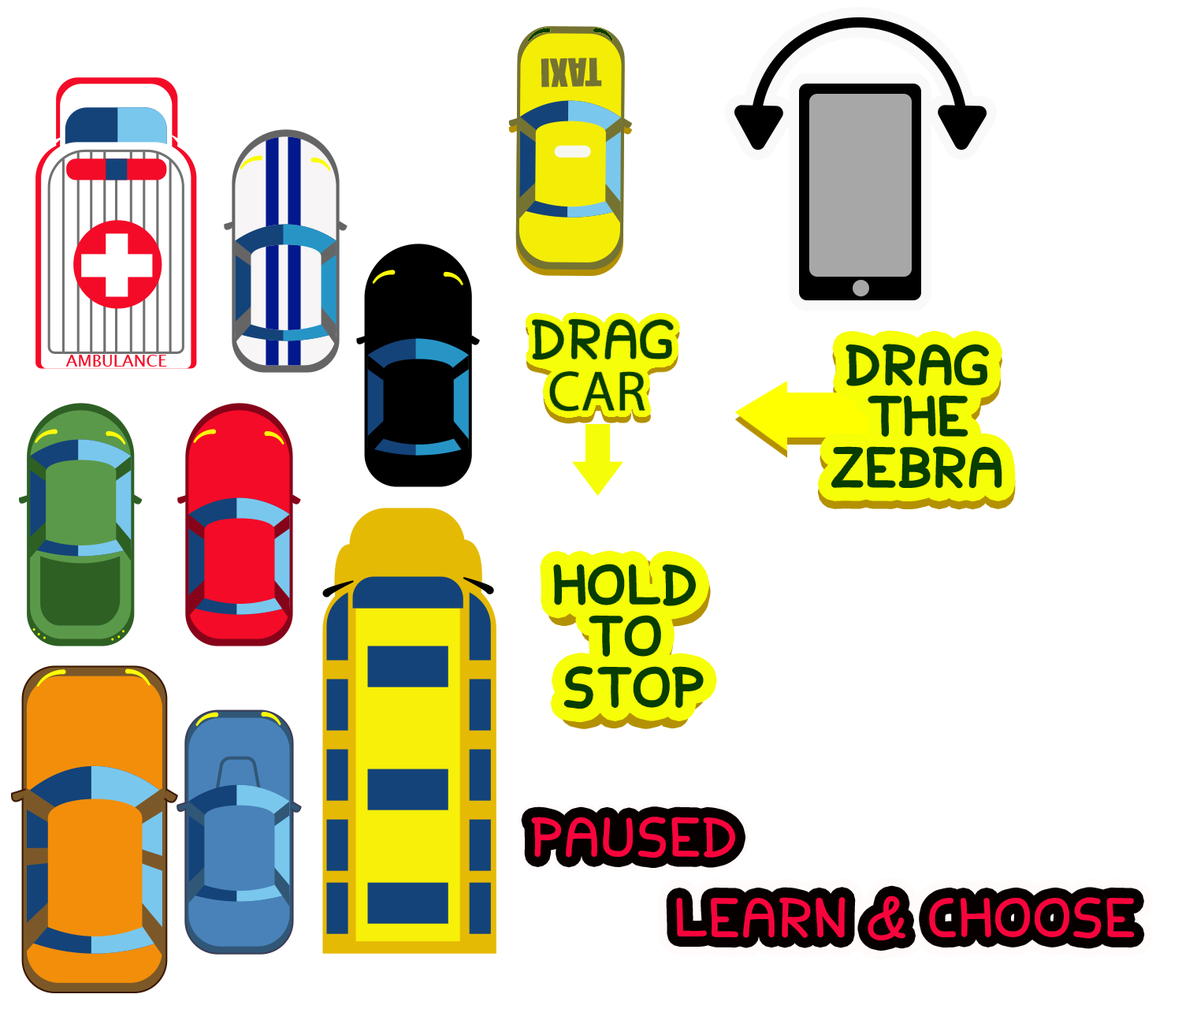
<style>
.page{position:relative;width:1182px;height:1009px;background:#ffffff}
.page>*{position:absolute;margin:0}
.t1{font:56.7px/51.2px "FamilyandFriends";color:#073d02}
.t2{font:56.7px "FamilyandFriends";color:#f8043d}
</style>
<div class="page">
<p class="t1" style="left:831px;top:344px;width:171px;height:144px;text-align:center">DRAG<br>THE<br>ZEBRA</p>
<p class="t1" style="left:831px;top:344px;width:171px;height:144px;text-align:center">DRAG<br>THE<br>ZEBRA</p>
<p class="t1" style="left:554px;top:564px;width:149px;height:144px;text-align:center">HOLD <br>TO <br>STOP</p>
<p class="t1" style="left:554px;top:564px;width:149px;height:144px;text-align:center">HOLD <br>TO <br>STOP</p>
<p class="t2" style="left:531px;top:816px;width:204px;height:41px">PAUSED</p>
<p class="t2" style="left:531px;top:816px;width:204px;height:41px">PAUSED</p>
<p class="t2" style="left:676px;top:895px;width:459px;height:45px">LEARN &amp; CHOOSE</p>
<p class="t2" style="left:676px;top:895px;width:459px;height:45px">LEARN &amp; CHOOSE</p>
</div>
